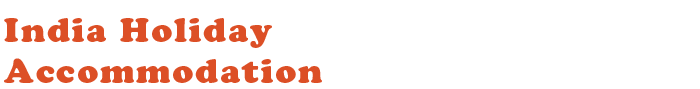
<style>
.page{position:relative;width:700px;height:89px;background:#ffffff}
.page>*{position:absolute;margin:0}
.t1{font:34px "CooperBlackStd";letter-spacing:0.05em;color:#dc4f26}
</style>
<div class="page">
<p class="t1" style="left:4px;top:18px;width:318px;height:65px">India Holiday<br>Accommodation</p>
</div>
